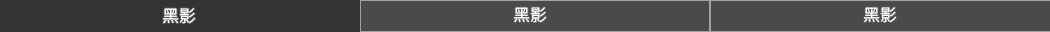
<style>
.page{position:relative;width:1050px;height:32px;background:#4a4a4a}
.page>*{position:absolute;margin:0}
.t1{font:16.7px "SourceHanSansSC-Normal";color:#ffffff}
</style>
<div class="page">
<p class="t1" style="left:163px;top:8px;width:33px;height:16px">黑影</p>
<p class="t1" style="left:514px;top:7px;width:33px;height:16px">黑影</p>
<p class="t1" style="left:864px;top:7px;width:33px;height:16px">黑影</p>
</div>
